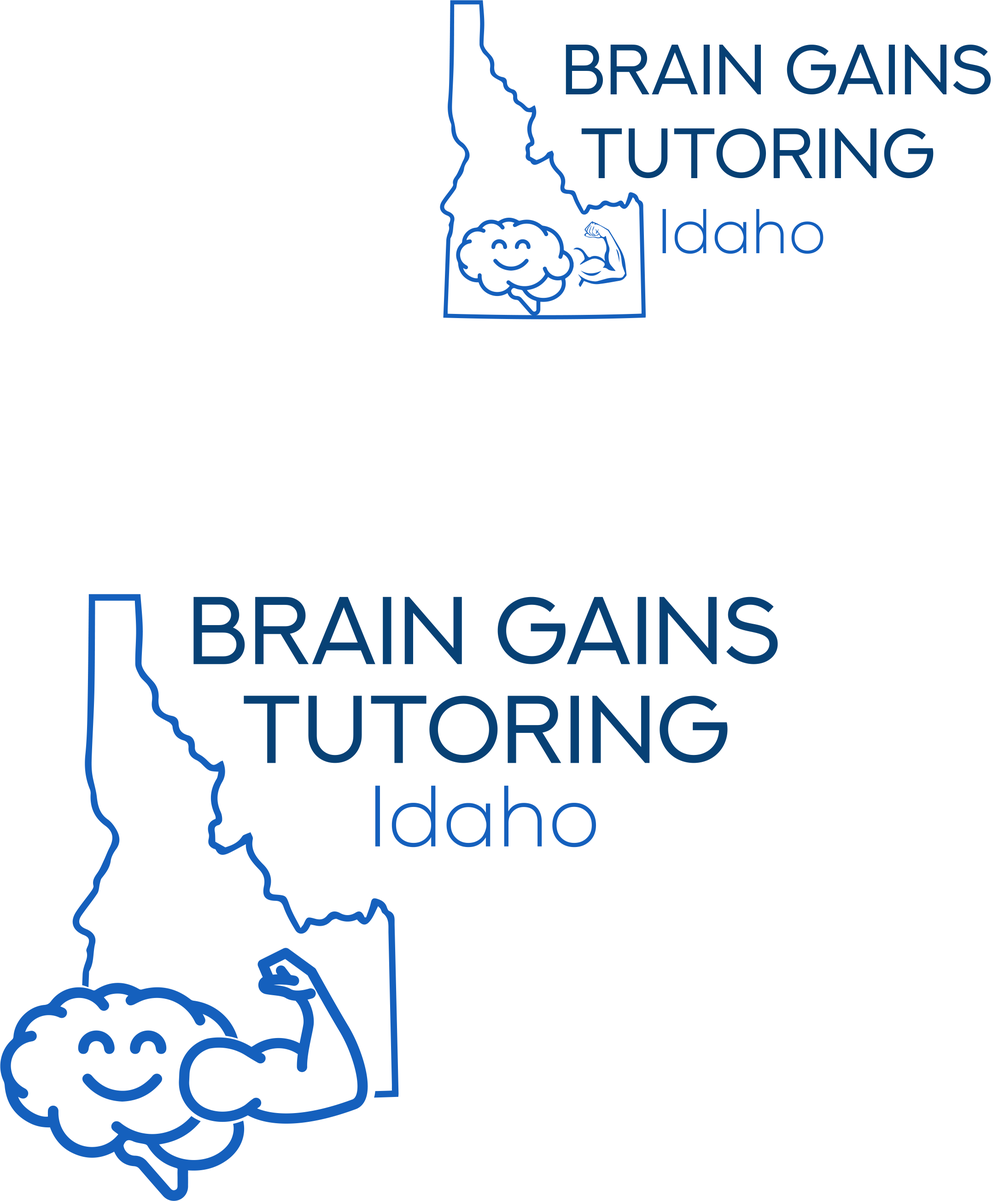
<style>
.page{position:relative;width:993px;height:1201px;background:#ffffff}
.page>*{position:absolute;margin:0}
.t1{font:69.7px "NEXTART";color:#074175}
.t2{font:63.1px "Nexa-Light";color:#1560bd}
</style>
<div class="page">
<p class="t1" style="left:565px;top:44px;width:425px;height:135px">BRAIN GAINS<br> TUTORING</p>
<p class="t2" style="left:662px;top:209px;width:161px;height:45px">Idaho</p>
</div>
